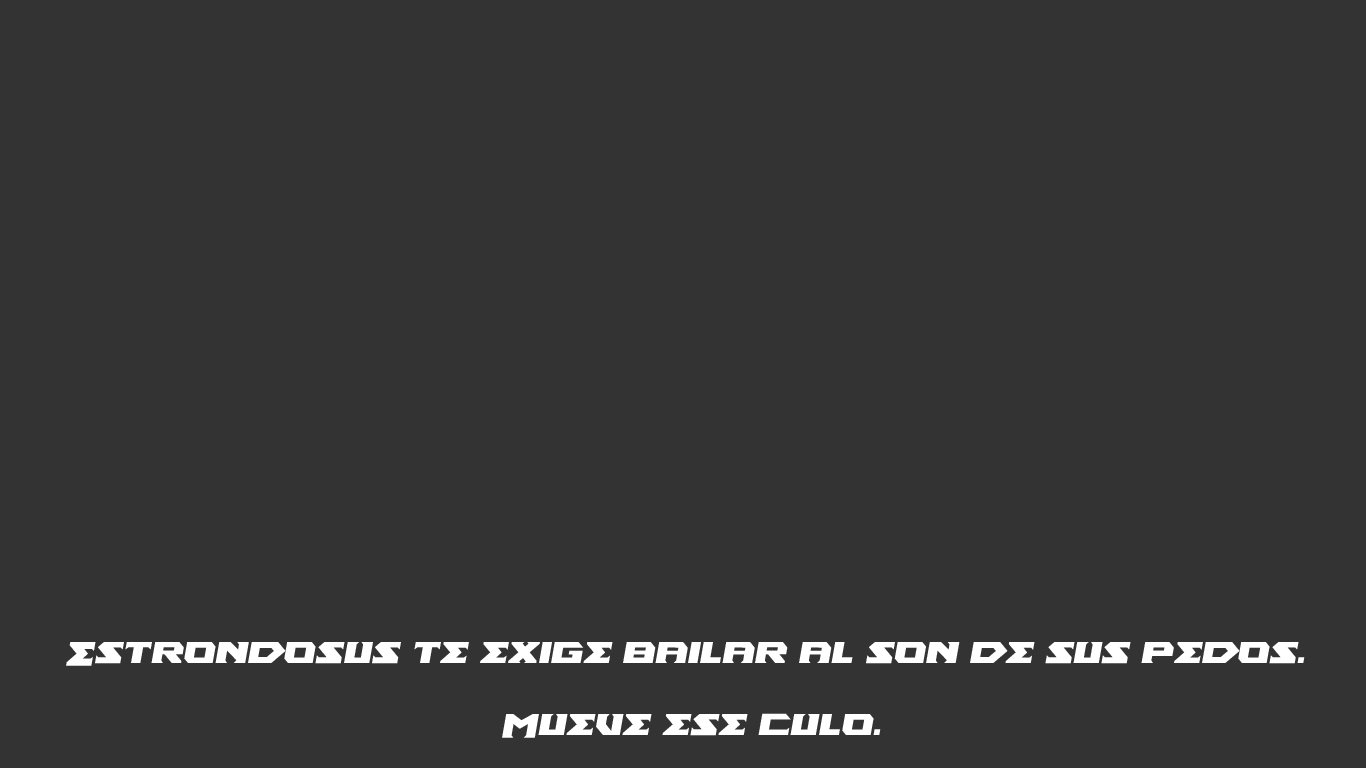
<style>
.page{position:relative;width:1366px;height:768px;background:#333333}
.page>*{position:absolute;margin:0}
.t1{font:30px/72px "AncientGod-Bold";color:#ffffff;font-style:italic}
</style>
<div class="page">
<p class="t1" style="left:66px;top:642px;width:1239px;height:96px;text-align:center">Estrondosus te exige bailar al son de sus pedos. <br>Mueve ese culo.</p>
</div>
